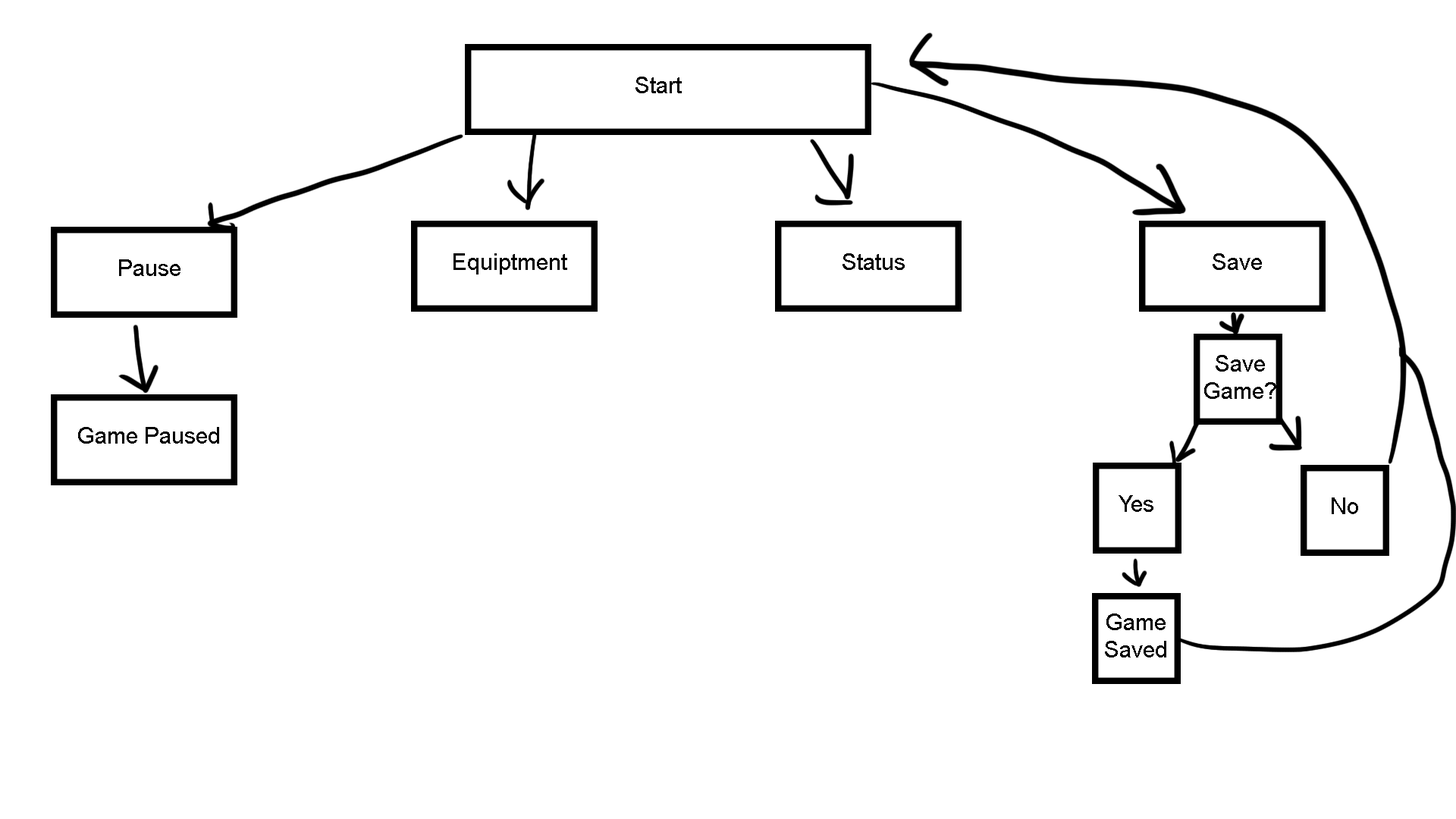
<style>
.page{position:relative;width:1456px;height:819px;background:#ffffff}
.page>*{position:absolute;margin:0}
.t1{font:22.7px "ArialMT";color:#000000}
</style>
<div class="page">
<p class="t1" style="left:635px;top:77px;width:47px;height:16px">Start</p>
<p class="t1" style="left:453px;top:253px;width:114px;height:22px">Equiptment</p>
<p class="t1" style="left:842px;top:253px;width:63px;height:17px">Status</p>
<p class="t1" style="left:1213px;top:253px;width:49px;height:17px">Save</p>
<p class="t1" style="left:119px;top:259px;width:61px;height:17px">Pause</p>
<p class="t1" style="left:1204px;top:355px;width:72px;height:44px;text-align:center">Save<br>Game?</p>
<p class="t1" style="left:78px;top:427px;width:141px;height:17px">Game Paused</p>
<p class="t1" style="left:1119px;top:495px;width:34px;height:17px">Yes</p>
<p class="t1" style="left:1332px;top:497px;width:26px;height:17px">No</p>
<p class="t1" style="left:1105px;top:613px;width:61px;height:44px;text-align:center">Game<br>Saved</p>
</div>
